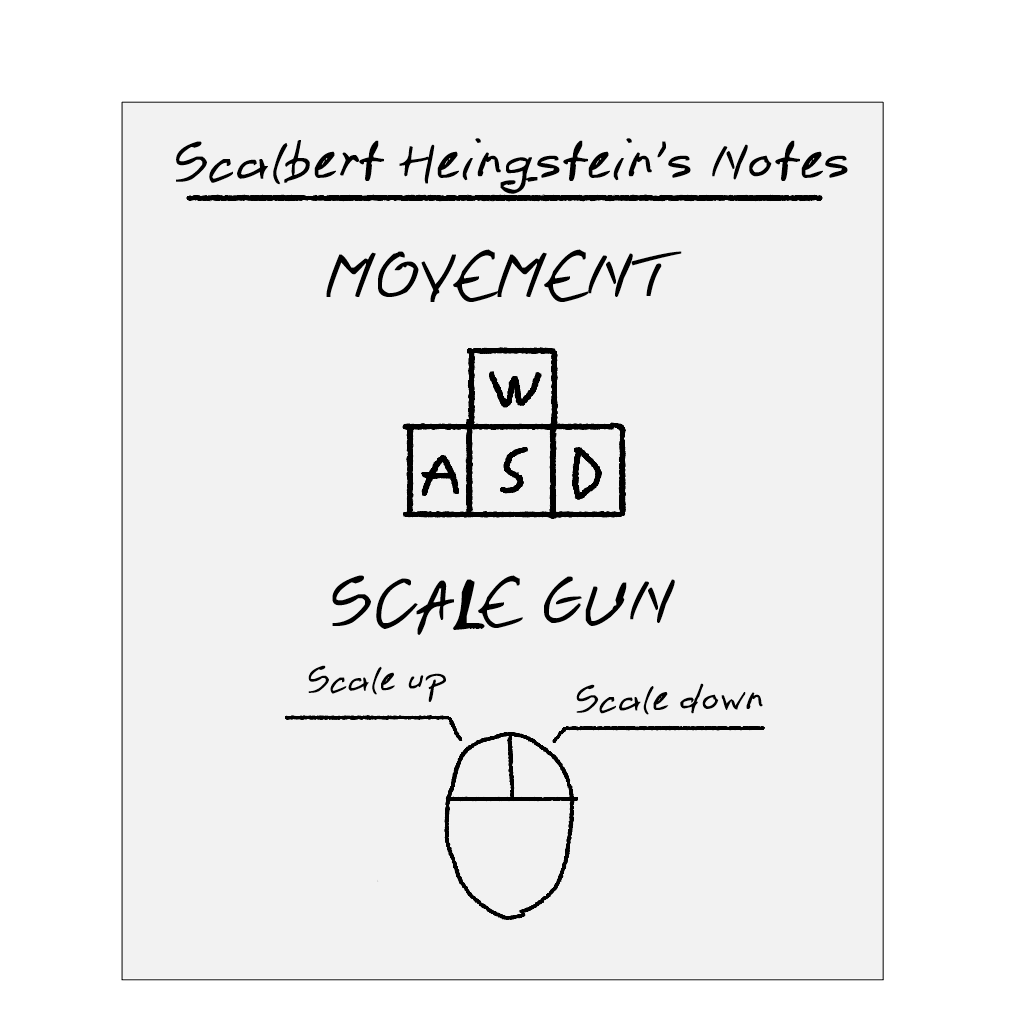
<style>
.page{position:relative;width:1024px;height:1024px;background:#f2f2f2}
.page>*{position:absolute;margin:0}
.t1{font:48px "pen2";color:#000000}
.t2{font:60px "pen2";color:#000000}
.t3{font:32.3px "pen2";color:#000000}
.t4{font:33.4px "pen2";color:#000000}
</style>
<div class="page">
<p class="t1" style="left:176px;top:138px;width:672px;height:56px">Scalbert Heingstein’s Notes</p>
<p class="t2" style="left:326px;top:249px;width:356px;height:53px">MOVEMENT</p>
<p class="t2" style="left:332px;top:575px;width:343px;height:60px">SCALE GUN</p>
<p class="t3" style="left:308px;top:665px;width:138px;height:37px">Scale up</p>
<p class="t4" style="left:576px;top:683px;width:187px;height:32px">Scale down</p>
</div>
